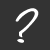
<style>
.page{position:relative;width:50px;height:50px;background:#333333}
.page>*{position:absolute;margin:0}
.t1{font:36px "Kosalsayshy";color:#ffffff}
</style>
<div class="page">
<p class="t1" style="left:15px;top:8px;width:24px;height:35px">?</p>
</div>
